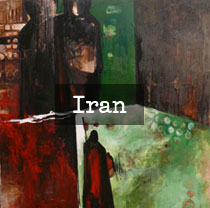
<style>
.page{position:relative;width:210px;height:208px}
.page>*{position:absolute;margin:0}
.t1{font:22px "Passport";color:#ffffff}
</style>
<div class="page">
<p class="t1" style="left:73px;top:95px;width:54px;height:19px">Iran</p>
</div>
